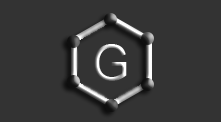
<style>
.page{position:relative;width:221px;height:122px;background:#333333}
.page>*{position:absolute;margin:0}
.t1{font:48px "ArialMT"}
</style>
<div class="page">
<p class="t1" style="left:94px;top:44px;width:33px;height:37px">G</p>
</div>
